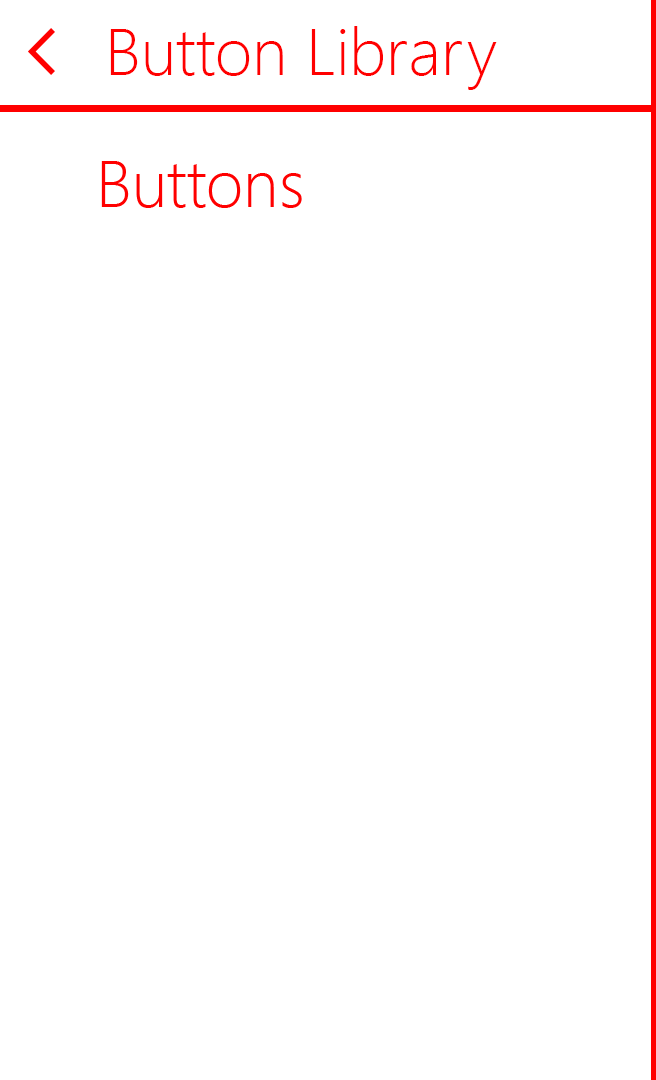
<style>
.page{position:relative;width:656px;height:1080px;background:#ffffff}
.page>*{position:absolute;margin:0}
.t1{font:66px "SegoeUI-Light";color:#ff0000}
</style>
<div class="page">
<p class="t1" style="left:110px;top:26px;width:387px;height:64px">Button Library</p>
<p class="t1" style="left:101px;top:161px;width:201px;height:47px">Buttons</p>
</div>
